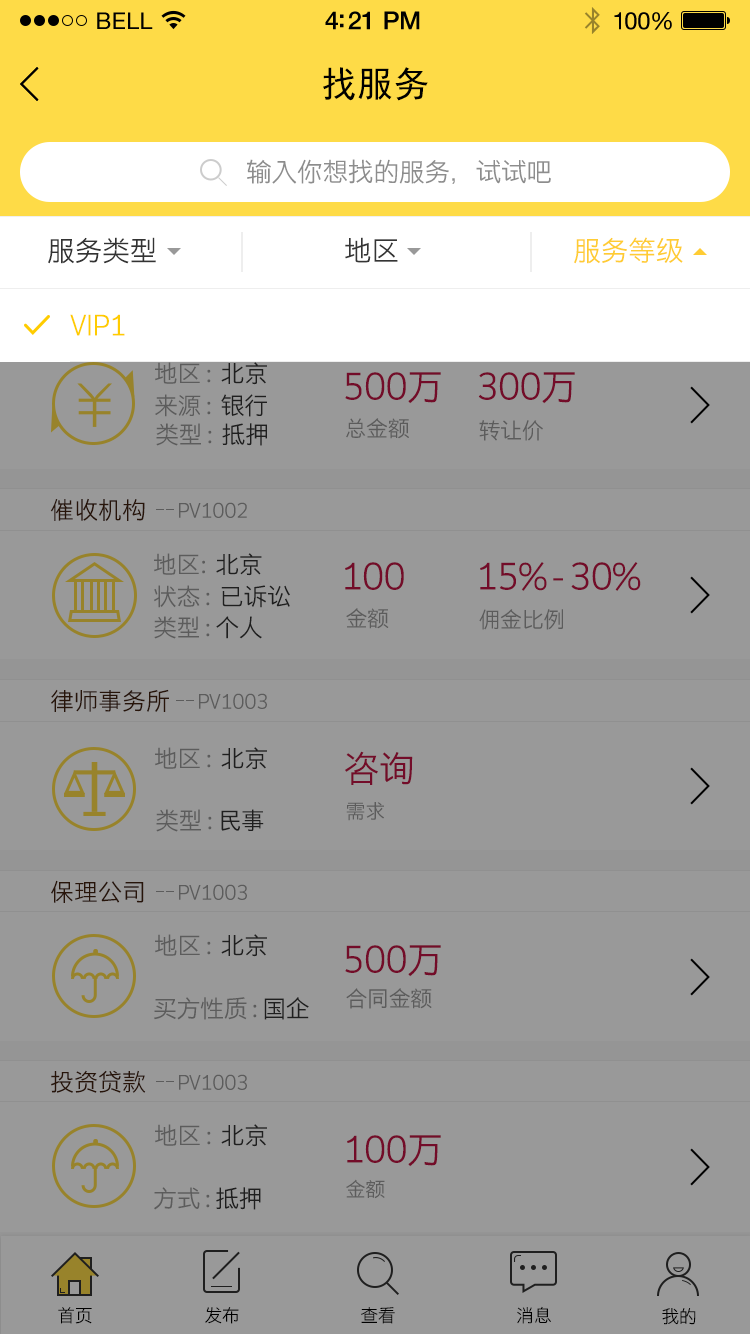
<style>
.page{position:relative;width:750px;height:1334px;background:#999999}
.page>*{position:absolute;margin:0}
.t1{font:23px "HelveticaNeue";letter-spacing:0.02em;color:#000000}
.t2{font:25px "HelveticaNeue-Medium";letter-spacing:-0.02em;color:#000000}
.t3{font:24px "HelveticaNeue";letter-spacing:-0.02em;color:#010101}
.t4{font:36px "SimHei";color:#000000}
.t5{font:26px "STHeitiSC-Light";letter-spacing:-0.02em;color:#8d8d8d}
.t6{font:28px "STHeitiSC-Light";letter-spacing:-0.02em;color:#333333}
.t7{font:28px "STHeitiSC-Light";letter-spacing:-0.02em;color:#353535}
.t8{font:28px "STHeitiSC-Light";letter-spacing:-0.02em;color:#ffcc33}
.t9{font:28px "STHeitiSC-Light";letter-spacing:-0.02em;color:#ffcc00}
.t10{font:24px "STHeitiSC-Light";letter-spacing:-0.02em}
.t11{font:36px "STHeitiSC-Light";letter-spacing:-0.02em;color:#730c29}
.t12{font:22px "STHeitiSC-Light";letter-spacing:-0.02em;color:#5c5c5c}
.t13{font:24px "STHeitiSC-Light";color:#271409}
.t14{font:20px "STHeitiSC-Light";letter-spacing:-0.02em;color:#5c5c5c}
.t15{font:24px "STHeitiSC-Light";letter-spacing:-0.02em;color:#5c5c5c}
.t16{font:24px "STHeitiSC-Light"}
.t17{font:20px "STHeitiSC-Light";letter-spacing:-0.02em}
.t18{font:24px "STHeitiSC-Light";letter-spacing:-0.02em;color:#999999}
.t19{font:24px "STHeitiSC-Light";letter-spacing:-0.02em;color:#333333}
.t20{font:18px "STHeitiSC-Light";letter-spacing:-0.02em;color:#000000}
</style>
<div class="page">
<p class="t1" style="left:97px;top:12px;width:56px;height:17px">BELL</p>
<p class="t1" style="left:97px;top:12px;width:56px;height:17px">BELL</p>
<p class="t2" style="left:325px;top:11px;width:95px;height:19px">4:21 PM</p>
<p class="t2" style="left:325px;top:11px;width:95px;height:19px">4:21 PM</p>
<p class="t3" style="left:614px;top:12px;width:58px;height:18px">100%</p>
<p class="t3" style="left:614px;top:12px;width:58px;height:18px">100%</p>
<p class="t4" style="left:323px;top:67px;width:105px;height:34px">找服务</p>
<p class="t5" style="left:247px;top:159px;width:304px;height:25px">输入你想找的服务，试试吧</p>
<p class="t6" style="left:48px;top:237px;width:108px;height:27px">服务类型</p>
<p class="t7" style="left:345px;top:237px;width:53px;height:26px">地区</p>
<p class="t8" style="left:574px;top:237px;width:109px;height:27px">服务等级</p>
<p class="t9" style="left:70px;top:314px;width:55px;height:22px">VIP1</p>
<p class="t10" style="left:155px;top:362px;width:112px;height:23px">地区 :  北京</p>
<p class="t10" style="left:155px;top:362px;width:112px;height:23px">地区 :  北京</p>
<p class="t11" style="left:345px;top:372px;width:96px;height:32px">500万</p>
<p class="t11" style="left:345px;top:372px;width:96px;height:32px">500万</p>
<p class="t11" style="left:478px;top:372px;width:97px;height:32px">300万</p>
<p class="t11" style="left:478px;top:372px;width:97px;height:32px">300万</p>
<p class="t10" style="left:155px;top:394px;width:112px;height:23px">来源 :  银行</p>
<p class="t10" style="left:155px;top:394px;width:112px;height:23px">来源 :  银行</p>
<p class="t10" style="left:156px;top:423px;width:111px;height:23px">类型 :  抵押</p>
<p class="t10" style="left:156px;top:423px;width:111px;height:23px">类型 :  抵押</p>
<p class="t12" style="left:346px;top:418px;width:63px;height:21px">总金额</p>
<p class="t12" style="left:346px;top:418px;width:63px;height:21px">总金额</p>
<p class="t12" style="left:479px;top:420px;width:64px;height:21px">转让价</p>
<p class="t12" style="left:479px;top:420px;width:64px;height:21px">转让价</p>
<p class="t13" style="left:50px;top:498px;width:95px;height:23px">催收机构</p>
<p class="t14" style="left:179px;top:502px;width:68px;height:16px">PV1002</p>
<p class="t10" style="left:154px;top:553px;width:108px;height:23px">地区:  北京</p>
<p class="t10" style="left:154px;top:553px;width:108px;height:23px">地区:  北京</p>
<p class="t11" style="left:345px;top:562px;width:59px;height:28px">100</p>
<p class="t11" style="left:345px;top:562px;width:59px;height:28px">100</p>
<p class="t11" style="left:480px;top:562px;width:161px;height:29px">15% - 30%</p>
<p class="t11" style="left:480px;top:562px;width:161px;height:29px">15% - 30%</p>
<p class="t10" style="left:154px;top:585px;width:136px;height:23px">状态 :  已诉讼</p>
<p class="t10" style="left:154px;top:585px;width:136px;height:23px">状态 :  已诉讼</p>
<p class="t15" style="left:154px;top:616px;width:108px;height:23px">类型 : 个人</p>
<p class="t15" style="left:154px;top:616px;width:108px;height:23px">类型 : 个人</p>
<p class="t12" style="left:346px;top:608px;width:43px;height:21px">金额</p>
<p class="t12" style="left:346px;top:608px;width:43px;height:21px">金额</p>
<p class="t12" style="left:479px;top:609px;width:84px;height:21px">佣金比例</p>
<p class="t12" style="left:479px;top:609px;width:84px;height:21px">佣金比例</p>
<p class="t16" style="left:51px;top:689px;width:94px;height:23px">法律服务</p>
<p class="t13" style="left:51px;top:689px;width:118px;height:23px">律师事务所</p>
<p class="t14" style="left:199px;top:693px;width:68px;height:16px">PV1003</p>
<p class="t10" style="left:155px;top:747px;width:112px;height:23px">地区 :  北京</p>
<p class="t10" style="left:155px;top:747px;width:112px;height:23px">地区 :  北京</p>
<p class="t11" style="left:345px;top:751px;width:68px;height:34px">咨询</p>
<p class="t11" style="left:345px;top:751px;width:68px;height:34px">咨询</p>
<p class="t10" style="left:156px;top:809px;width:108px;height:23px">类型 : 民事</p>
<p class="t10" style="left:156px;top:809px;width:108px;height:23px">类型 : 民事</p>
<p class="t14" style="left:346px;top:802px;width:38px;height:19px">需求</p>
<p class="t14" style="left:346px;top:802px;width:38px;height:19px">需求</p>
<p class="t13" style="left:51px;top:880px;width:93px;height:23px">保理公司</p>
<p class="t14" style="left:179px;top:884px;width:68px;height:16px">PV1003</p>
<p class="t10" style="left:155px;top:934px;width:112px;height:23px">地区 :  北京</p>
<p class="t10" style="left:155px;top:934px;width:112px;height:23px">地区 :  北京</p>
<p class="t11" style="left:345px;top:945px;width:96px;height:32px">500万</p>
<p class="t11" style="left:345px;top:945px;width:96px;height:32px">500万</p>
<p class="t12" style="left:346px;top:988px;width:86px;height:21px">合同金额</p>
<p class="t12" style="left:346px;top:988px;width:86px;height:21px">合同金额</p>
<p class="t10" style="left:154px;top:997px;width:155px;height:23px">买方性质 : 国企</p>
<p class="t10" style="left:154px;top:997px;width:155px;height:23px">买方性质 : 国企</p>
<p class="t16" style="left:51px;top:1070px;width:94px;height:23px">融资借贷</p>
<p class="t13" style="left:51px;top:1070px;width:95px;height:23px">投资贷款</p>
<p class="t14" style="left:179px;top:1074px;width:68px;height:16px">PV1003</p>
<p class="t10" style="left:155px;top:1125px;width:112px;height:23px">地区 :  北京</p>
<p class="t10" style="left:155px;top:1124px;width:112px;height:23px">地区 :  北京</p>
<p class="t11" style="left:347px;top:1136px;width:94px;height:32px">100万</p>
<p class="t11" style="left:347px;top:1135px;width:94px;height:32px">100万</p>
<p class="t17" style="left:346px;top:1180px;width:39px;height:20px">金额</p>
<p class="t14" style="left:346px;top:1179px;width:39px;height:20px">金额</p>
<p class="t18" style="left:154px;top:1187px;width:107px;height:23px">方式 : <span class="t19">抵押</span></p>
<p class="t18" style="left:155px;top:1187px;width:111px;height:23px">方式 :  <span class="t19">抵押</span></p>
<p class="t20" style="left:58px;top:1307px;width:34px;height:17px">首页</p>
<p class="t20" style="left:205px;top:1307px;width:34px;height:17px">发布</p>
<p class="t20" style="left:361px;top:1307px;width:34px;height:17px">查看</p>
<p class="t20" style="left:517px;top:1306px;width:34px;height:18px">消息</p>
<p class="t20" style="left:662px;top:1308px;width:34px;height:17px">我的</p>
</div>
